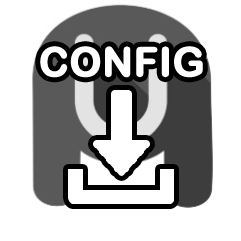
<style>
.page{position:relative;width:241px;height:241px;background:#ffffff}
.page>*{position:absolute;margin:0}
.t1{font:40px "ArialRoundedMTBold";color:#ffffff;font-weight:bold}
</style>
<div class="page">
<p class="t1" style="left:40px;top:46px;width:163px;height:32px">CONFIG</p>
</div>
